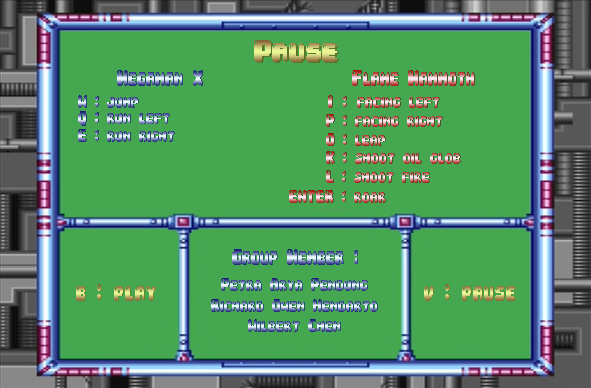
<style>
.page{position:relative;width:591px;height:388px;background:#45a750}
.page>*{position:absolute;margin:0}
.t1{font:26.8px "04b30";scale:0.77 1}
.t2{font:19.2px "04b30";scale:0.59 1}
.t3{font:15.6px "04b30";scale:0.59 1}
.t4{font:15.6px "04b30";letter-spacing:0.1em;scale:0.59 1}
.t5{font:21.6px "04b30";scale:0.59 1}
</style>
<div class="page">
<p class="t1" style="left:254px;top:40px;width:83px;height:22px">Pause</p>
<p class="t1" style="left:256px;top:41px;width:83px;height:22px">Pause</p>
<p class="t2" style="left:117px;top:70px;width:85px;height:16px">Megaman X</p>
<p class="t2" style="left:118px;top:70px;width:85px;height:16px">Megaman X</p>
<p class="t2" style="left:352px;top:70px;width:122px;height:16px">Flame Mammoth</p>
<p class="t2" style="left:353px;top:70px;width:122px;height:16px">Flame Mammoth</p>
<p class="t3" style="left:78px;top:95px;width:60px;height:13px">W : jump</p>
<p class="t3" style="left:79px;top:95px;width:60px;height:13px">W : jump</p>
<p class="t3" style="left:328px;top:95px;width:111px;height:13px"><span class="t4">I : </span>facing left</p>
<p class="t3" style="left:329px;top:95px;width:111px;height:13px"><span class="t4">I : </span>facing left</p>
<p class="t3" style="left:78px;top:111px;width:91px;height:15px">Q : run left</p>
<p class="t3" style="left:79px;top:111px;width:91px;height:15px">Q : run left</p>
<p class="t3" style="left:326px;top:114px;width:116px;height:13px">P : facing right</p>
<p class="t3" style="left:327px;top:114px;width:116px;height:13px">P : facing right</p>
<p class="t3" style="left:78px;top:129px;width:96px;height:13px">E : run right</p>
<p class="t3" style="left:79px;top:129px;width:96px;height:13px">E : run right</p>
<p class="t3" style="left:326px;top:133px;width:59px;height:13px">O : leap</p>
<p class="t3" style="left:327px;top:133px;width:59px;height:13px">O : leap</p>
<p class="t3" style="left:326px;top:151px;width:134px;height:13px">K : shoot oil glob</p>
<p class="t3" style="left:327px;top:151px;width:134px;height:13px">K : shoot oil glob</p>
<p class="t3" style="left:326px;top:170px;width:103px;height:13px">L : shoot fire</p>
<p class="t3" style="left:327px;top:170px;width:103px;height:13px">L : shoot fire</p>
<p class="t3" style="left:289px;top:190px;width:96px;height:13px">ENTER : roar</p>
<p class="t3" style="left:290px;top:190px;width:96px;height:13px">ENTER : roar</p>
<p class="t2" style="left:232px;top:249px;width:125px;height:16px">Group Member :</p>
<p class="t2" style="left:233px;top:249px;width:125px;height:16px">Group Member :</p>
<p class="t3" style="left:221px;top:278px;width:146px;height:13px">Petra Arya Pendung</p>
<p class="t3" style="left:222px;top:278px;width:146px;height:13px">Petra Arya Pendung</p>
<p class="t5" style="left:76px;top:284px;width:79px;height:17px">b : play</p>
<p class="t5" style="left:77px;top:284px;width:79px;height:17px">b : play</p>
<p class="t5" style="left:424px;top:284px;width:91px;height:17px">v : pause</p>
<p class="t5" style="left:425px;top:284px;width:91px;height:17px">v : pause</p>
<p class="t3" style="left:211px;top:299px;width:166px;height:13px">Richard Owen Hendarto</p>
<p class="t3" style="left:212px;top:299px;width:166px;height:13px">Richard Owen Hendarto</p>
<p class="t3" style="left:248px;top:319px;width:92px;height:13px">Wilbert Chen</p>
<p class="t3" style="left:249px;top:319px;width:92px;height:13px">Wilbert Chen</p>
</div>
